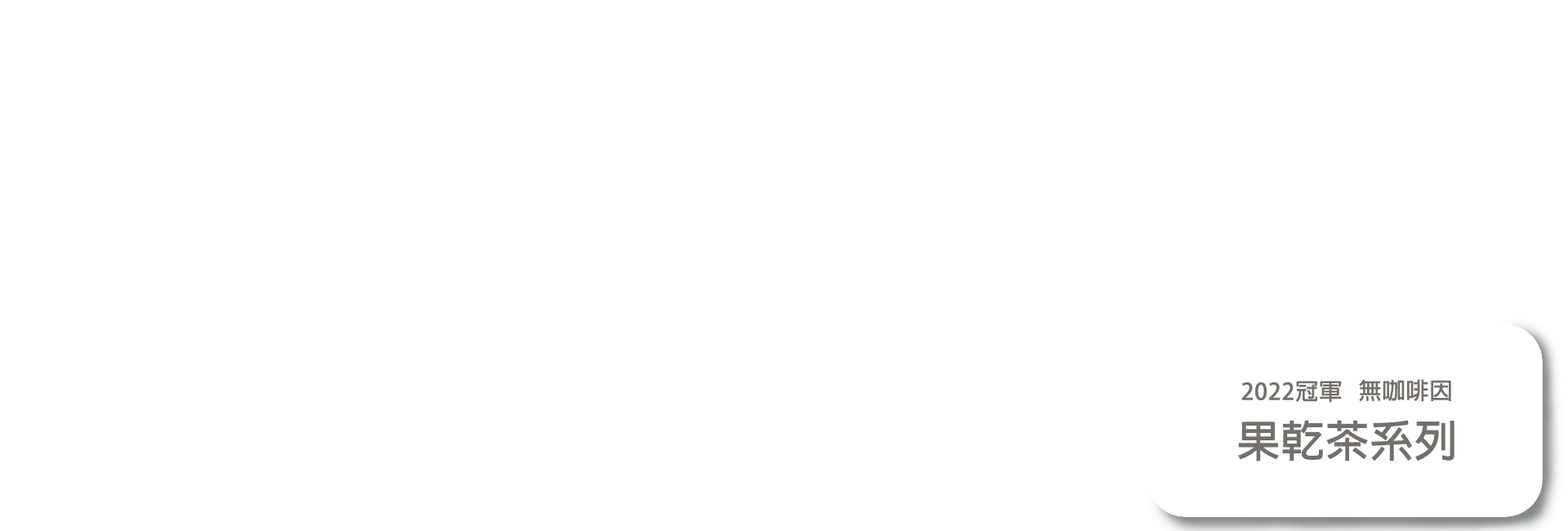
<style>
.page{position:relative;width:1568px;height:531px;background:#ffffff}
.page>*{position:absolute;margin:0}
.t1{font:23px "AdobeFanHeitiStd-Bold";color:#736f6b;text-transform:uppercase;font-weight:bold}
.t2{font:43.2px "AdobeFanHeitiStd-Bold";color:#736f6b;text-transform:uppercase;font-weight:bold}
</style>
<div class="page">
<p class="t1" style="left:1241px;top:381px;width:101px;height:22px">2022冠軍</p>
<p class="t1" style="left:1359px;top:379px;width:92px;height:23px">無咖啡因</p>
<p class="t2" style="left:1238px;top:420px;width:216px;height:41px">果乾茶系列</p>
</div>
